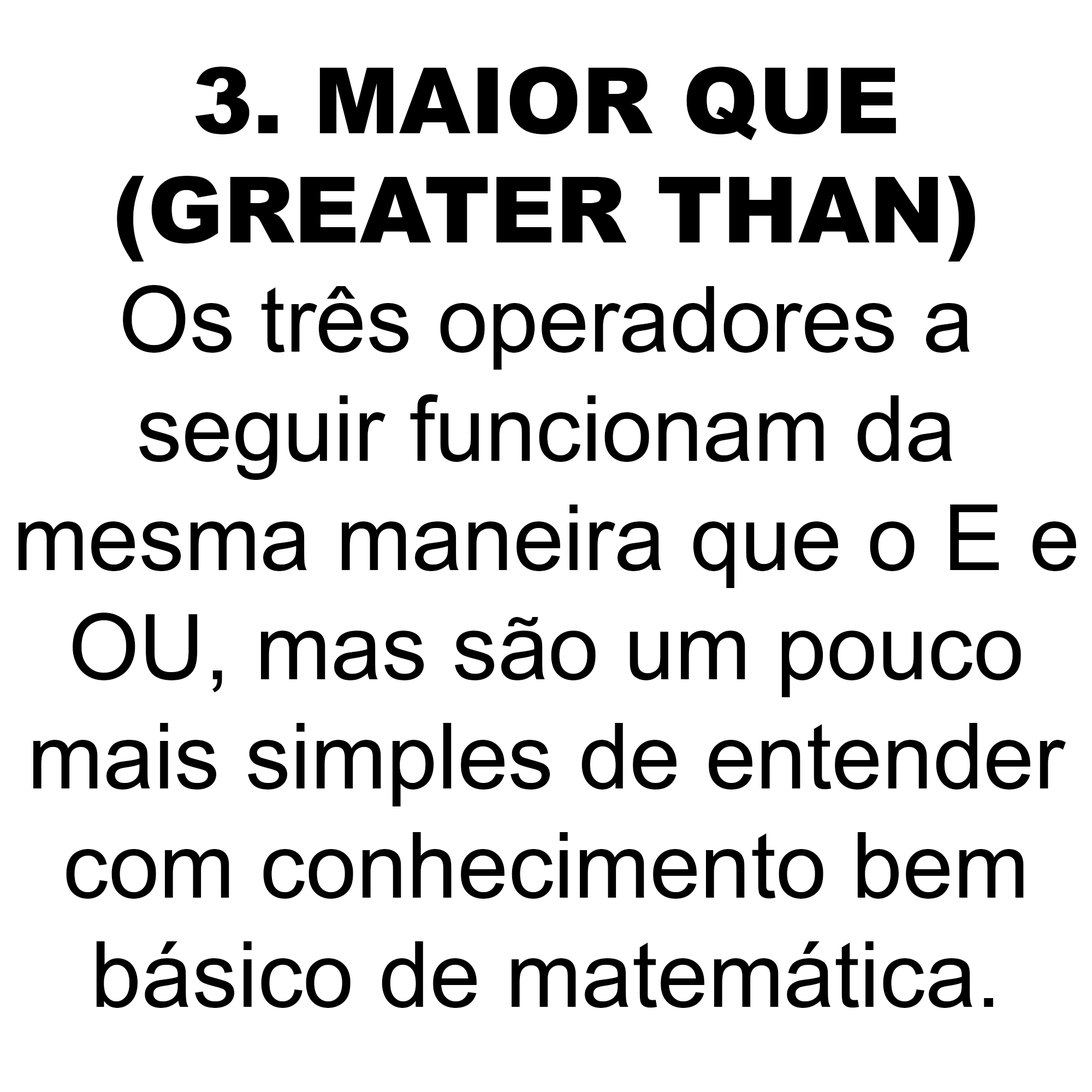
<style>
.page{position:relative;width:1092px;height:1092px;background:#ffffff}
.page>*{position:absolute;margin:0}
.t1{font:91px "ArialMT";color:#000000}
.t2{font:91px "Arial-Black";color:#000000}
</style>
<div class="page">
<p class="t1" style="left:19px;top:67px;width:1057px;height:941px;text-align:center"><span class="t2">3. MAIOR QUE<br>(GREATER THAN)<br></span>Os três operadores a<br>seguir funcionam da<br>mesma maneira que o E e<br>OU, mas são um pouco<br>mais simples de entender<br>com conhecimento bem<br>básico de matemática.</p>
</div>
